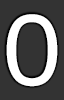
<style>
.page{position:relative;width:64px;height:100px;background:#333333}
.page>*{position:absolute;margin:0}
.t1{font:100px "Amiko-Regular";color:#ffffff}
</style>
<div class="page">
<p class="t1" style="left:6px;top:14px;width:52px;height:73px">0</p>
</div>
